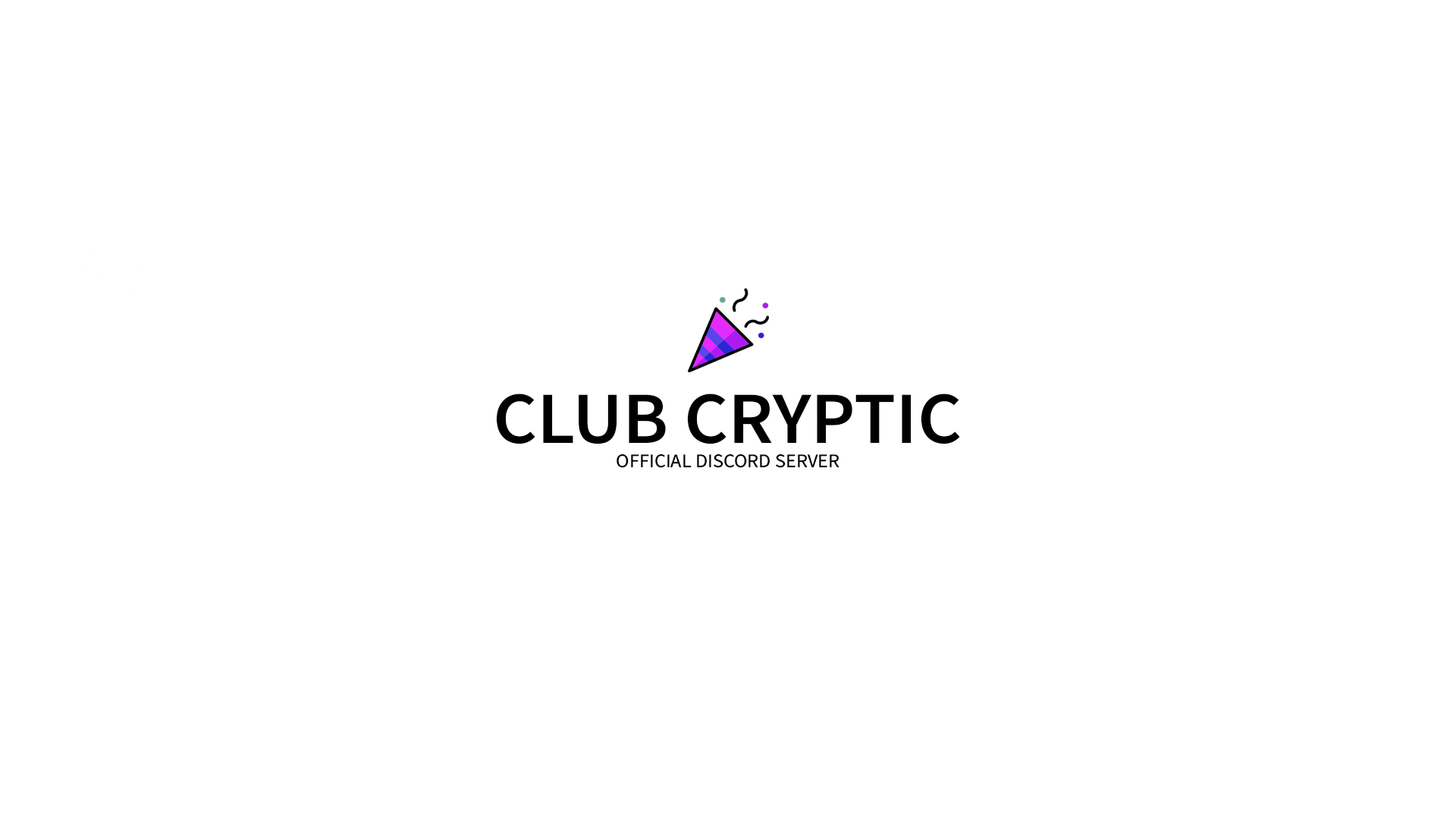
<style>
.page{position:relative;width:1456px;height:819px;background:#ffffff}
.page>*{position:absolute;margin:0}
.t1{font:73.5px "SourceSansRoman-Semibold";color:#000000;scale:1.04 1}
.t2{font:19.1px "SourceSansRoman-Regular";color:#000000;scale:1.04 1}
</style>
<div class="page">
<p class="t1" style="left:496px;top:394px;width:464px;height:50px">CLUB CRYPTIC</p>
<p class="t2" style="left:617px;top:454px;width:222px;height:14px">OFFICIAL DISCORD SERVER</p>
</div>
